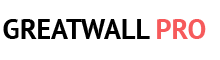
<style>
.page{position:relative;width:220px;height:60px;background:#ffffff}
.page>*{position:absolute;margin:0}
.t1{font:28px "PTSans-Bold";color:#000000}
.t2{font:28px "PTSans-Bold";color:#f65a5b}
</style>
<div class="page">
<p class="t1" style="left:3px;top:19px;width:203px;height:20px">GREATWALL <span class="t2">PRO</span></p>
</div>
